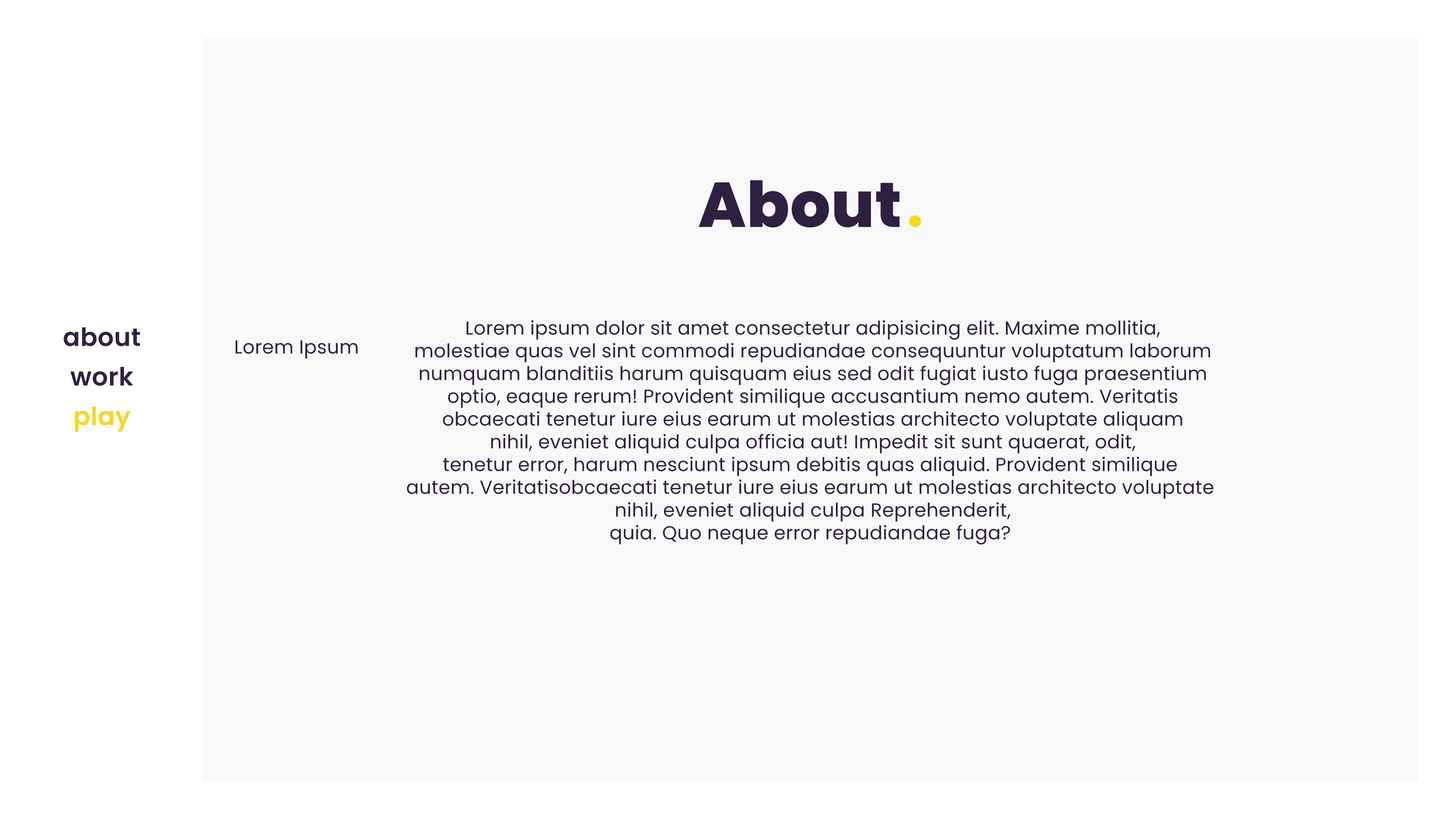
<style>
.page{position:relative;width:1456px;height:819px;background:#f8f8f8}
.page>*{position:absolute;margin:0}
.t1{font:63.2px "Poppins-ExtraBold";letter-spacing:0.01em;color:#2f2042}
.t2{font:25.3px/39.5px "Poppins-SemiBold";letter-spacing:0.01em;color:#2f2042}
.t3{font:25.3px/39.5px "Poppins-SemiBold";letter-spacing:0.01em;color:#f8d619}
.t4{font:19px "Poppins-Regular";letter-spacing:0.01em;color:#2f2042}
</style>
<div class="page">
<p class="t1" style="left:698px;top:180px;width:202px;height:47px">About</p>
<p class="t2" style="left:64px;top:327px;width:76px;height:105px;text-align:center">about<br>work<br><span class="t3">play</span></p>
<p class="t4" style="left:407px;top:320px;width:806px;height:224px;text-align:center">Lorem ipsum dolor sit amet consectetur adipisicing elit. Maxime mollitia,<br>molestiae quas vel sint commodi repudiandae consequuntur voluptatum laborum<br>numquam blanditiis harum quisquam eius sed odit fugiat iusto fuga praesentium<br>optio, eaque rerum! Provident similique accusantium nemo autem. Veritatis<br>obcaecati tenetur iure eius earum ut molestias architecto voluptate aliquam<br>nihil, eveniet aliquid culpa officia aut! Impedit sit sunt quaerat, odit,<br>tenetur error, harum nesciunt ipsum debitis quas aliquid. Provident similique <br>autem. Veritatisobcaecati tenetur iure eius earum ut molestias architecto voluptate <br>nihil, eveniet aliquid culpa Reprehenderit,<br>quia. Quo neque error repudiandae fuga?</p>
<p class="t4" style="left:235px;top:340px;width:123px;height:19px">Lorem Ipsum</p>
</div>
